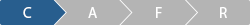
<style>
.page{position:relative;width:250px;height:25px;background:#b4b4b4}
.page>*{position:absolute;margin:0}
.t1{font:15px "MyriadPro-Regular";color:#ffffff}
</style>
<div class="page">
<p class="t1" style="left:23px;top:7px;width:9px;height:11px">C</p>
<p class="t1" style="left:88px;top:7px;width:9px;height:11px">A</p>
<p class="t1" style="left:156px;top:7px;width:6px;height:11px">F</p>
<p class="t1" style="left:220px;top:7px;width:7px;height:11px">R</p>
</div>
